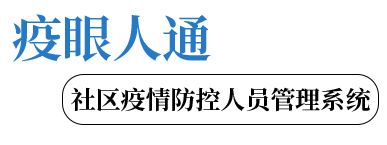
<style>
.page{position:relative;width:387px;height:145px;background:#ffffff}
.page>*{position:absolute;margin:0}
.t1{font:25px/66.7px "SourceHanSerifSC-Bold";color:#000000}
.t2{font:12px/66.7px "SourceHanSerifSC-Bold";color:#2579c7}
</style>
<div class="page">
<p class="t1" style="left:12px;top:14px;width:359px;height:98px"><span class="t2">疫眼人通 <br>       </span>社区疫情防控人员管理系统</p>
</div>
